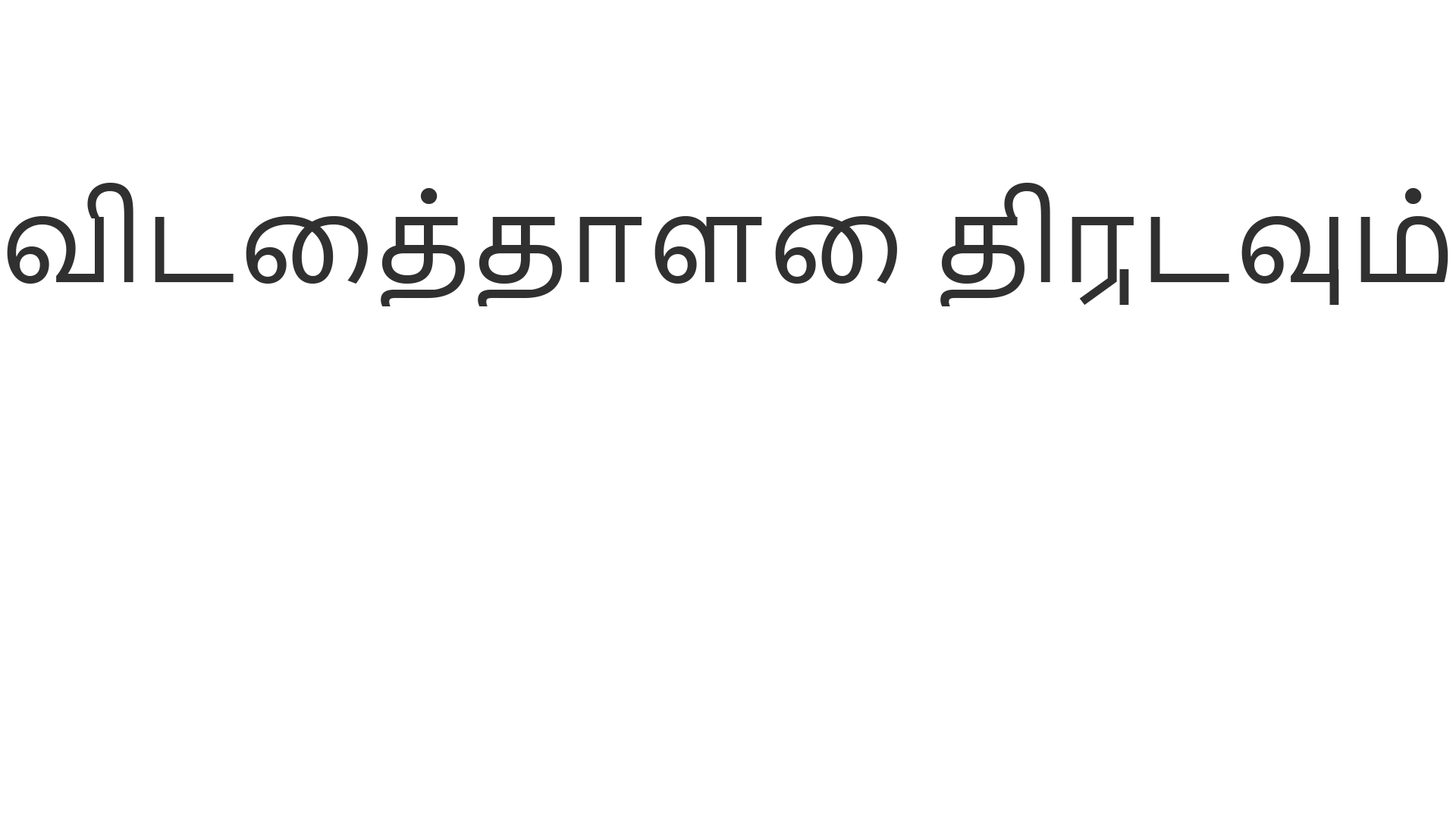
<style>
.page{position:relative;width:1456px;height:819px;background:#ffffff}
.page>*{position:absolute;margin:0}
.t1{font:111.5px "NirmalaUI";color:#303030}
</style>
<div class="page">
<p class="t1" style="left:7px;top:183px;width:1441px;height:123px">விடைத்தாளை திருடவும்</p>
</div>
